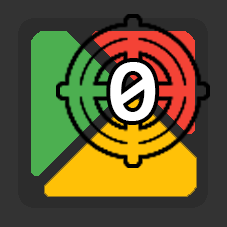
<style>
.page{position:relative;width:227px;height:227px;background:#333333}
.page>*{position:absolute;margin:0}
.t1{font:90px "Consolas-Bold";color:#ffffff}
</style>
<div class="page">
<p class="t1" style="left:110px;top:62px;width:46px;height:59px">0</p>
</div>
